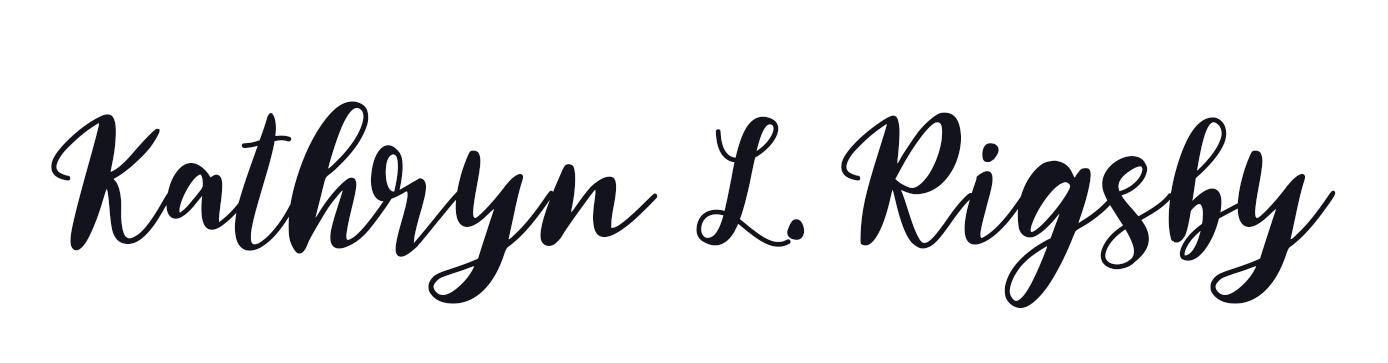
<style>
.page{position:relative;width:1388px;height:363px;background:#ffffff}
.page>*{position:absolute;margin:0}
.t1{font:200px "Christmasgift";color:#13131d}
</style>
<div class="page">
<p class="t1" style="left:51px;top:101px;width:1285px;height:208px">Kathryn L. Rigsby</p>
</div>
